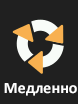
<style>
.page{position:relative;width:78px;height:104px;background:#202020}
.page>*{position:absolute;margin:0}
.t1{font:12px "Calibri-Bold";color:#ffffff}
</style>
<div class="page">
<p class="t1" style="left:4px;top:83px;width:73px;height:13px">Медленно</p>
</div>
